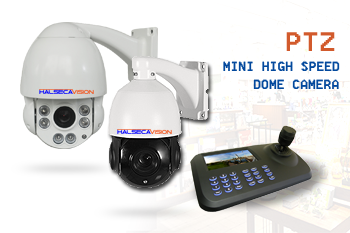
<style>
.page{position:relative;width:350px;height:233px;background:#ffffff}
.page>*{position:absolute;margin:0}
.t1{font:33.2px "8514oem";color:#d25a2c;font-variant:small-caps;scale:1.08 1}
.t2{font:16.7px "8514oem";color:#03499d;font-variant:small-caps}
</style>
<div class="page">
<p class="t1" style="left:286px;top:32px;width:49px;height:19px">PTZ</p>
<p class="t2" style="left:223px;top:61px;width:117px;height:10px">MINI HIGH SPEED</p>
<p class="t2" style="left:253px;top:79px;width:86px;height:10px">DOME CAMERA</p>
</div>
